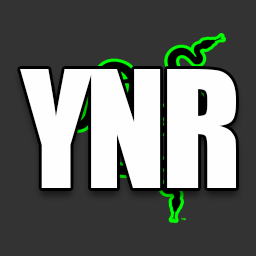
<style>
.page{position:relative;width:256px;height:256px;background:#333333}
.page>*{position:absolute;margin:0}
.t1{font:150px "Impact";letter-spacing:-0.04em;color:#fefefe}
</style>
<div class="page">
<p class="t1" style="left:20px;top:69px;width:216px;height:119px">YNR</p>
</div>
